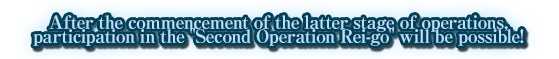
<style>
.page{position:relative;width:559px;height:59px}
.page>*{position:absolute;margin:0}
.t1{font:18px/14px "RyuminPro-ExBold";letter-spacing:-0.04em;color:#b9e0ff}
</style>
<div class="page">
<p class="t1" style="left:33px;top:15px;width:491px;height:31px;text-align:center">After the commencement of the latter stage of operations,<br>participation in the "Second Operation Rei-go" will be possible!</p>
</div>
